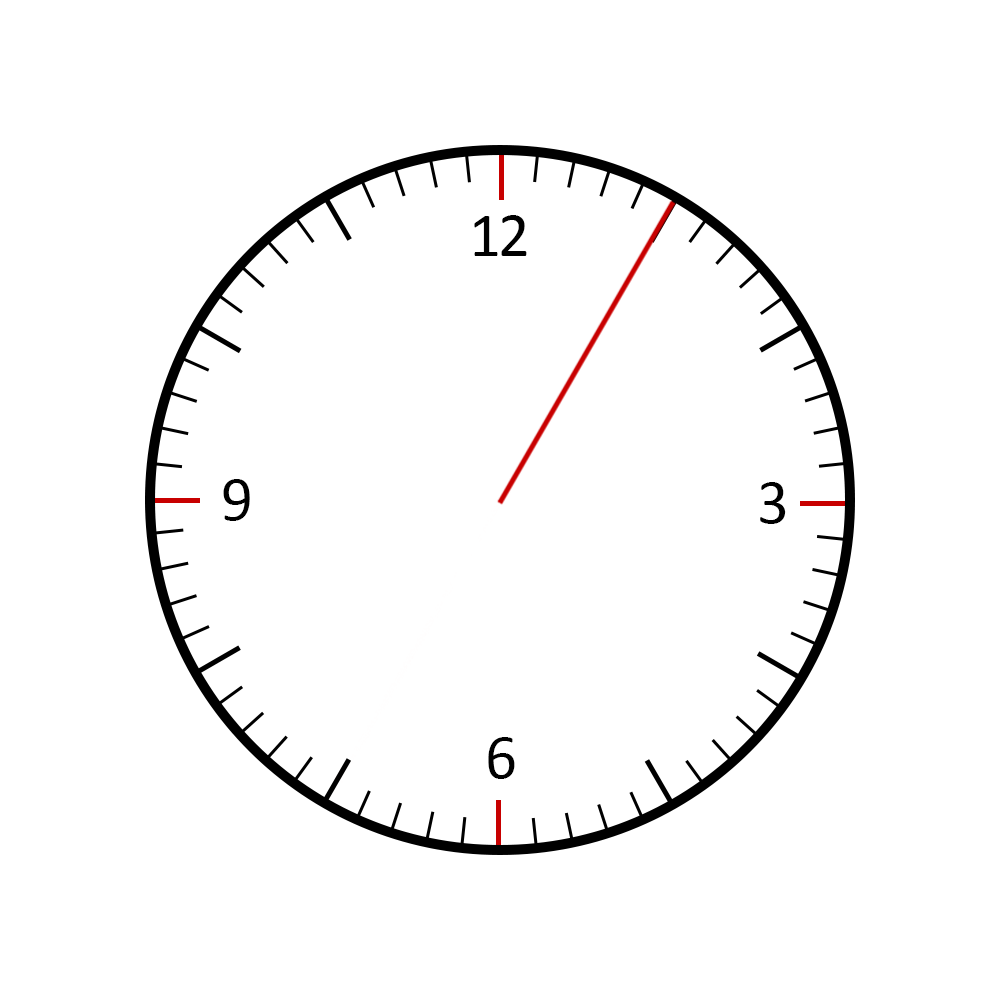
<style>
.page{position:relative;width:1000px;height:1000px;background:#ffffff}
.page>*{position:absolute;margin:0}
.t1{font:62.5px "Calibri";letter-spacing:-0.05em;color:#000000}
</style>
<div class="page">
<p class="t1" style="left:474px;top:215px;width:53px;height:41px">12</p>
<p class="t1" style="left:223px;top:479px;width:27px;height:42px">9</p>
<p class="t1" style="left:760px;top:482px;width:26px;height:42px">3</p>
<p class="t1" style="left:488px;top:737px;width:27px;height:42px">6</p>
</div>
